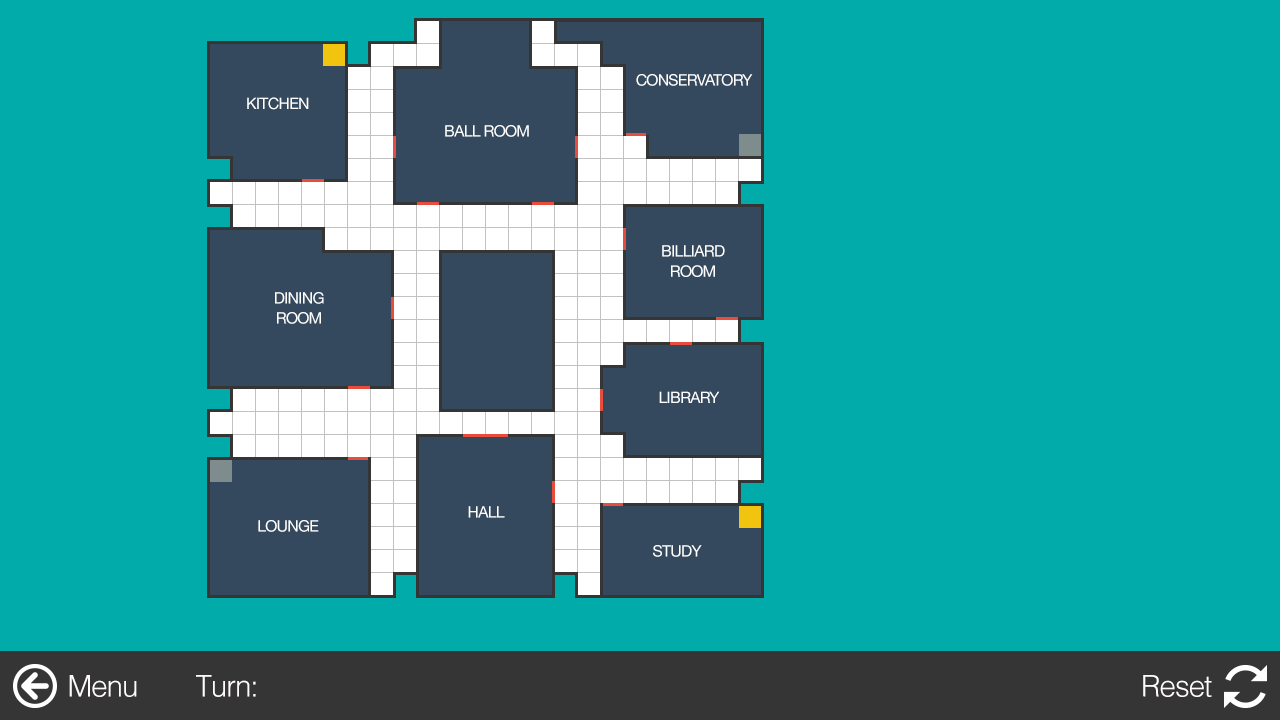
<style>
.page{position:relative;width:1280px;height:720px;background:#00aba9}
.page>*{position:absolute;margin:0}
.t1{font:15.8px "HelveticaNeue";letter-spacing:-0.04em;color:#ffffff}
.t2{font:15.8px/20.2px "HelveticaNeue";letter-spacing:-0.04em;color:#ffffff}
.t3{font:15.8px/20.1px "HelveticaNeue";letter-spacing:-0.04em;color:#ffffff}
.t4{font:29.7px "Helvetica-Light";letter-spacing:-0.04em;color:#fffbfb}
</style>
<div class="page">
<p class="t1" style="left:636px;top:74px;width:117px;height:12px">CONSERVATORY</p>
<p class="t1" style="left:247px;top:97px;width:62px;height:13px">KITCHEN</p>
<p class="t1" style="left:445px;top:125px;width:84px;height:12px">BALL ROOM</p>
<p class="t2" style="left:662px;top:245px;width:63px;height:32px;text-align:center">BILLIARD<br>ROOM</p>
<p class="t3" style="left:275px;top:292px;width:49px;height:32px;text-align:center">DINING<br>ROOM</p>
<p class="t1" style="left:659px;top:391px;width:61px;height:12px">LIBRARY</p>
<p class="t1" style="left:468px;top:506px;width:37px;height:12px">HALL</p>
<p class="t1" style="left:258px;top:520px;width:61px;height:12px">LOUNGE</p>
<p class="t1" style="left:653px;top:545px;width:49px;height:12px">STUDY</p>
<p class="t4" style="left:69px;top:675px;width:68px;height:22px">Menu</p>
<p class="t4" style="left:196px;top:675px;width:60px;height:22px">Turn:</p>
<p class="t4" style="left:1143px;top:675px;width:69px;height:22px">Reset</p>
</div>
